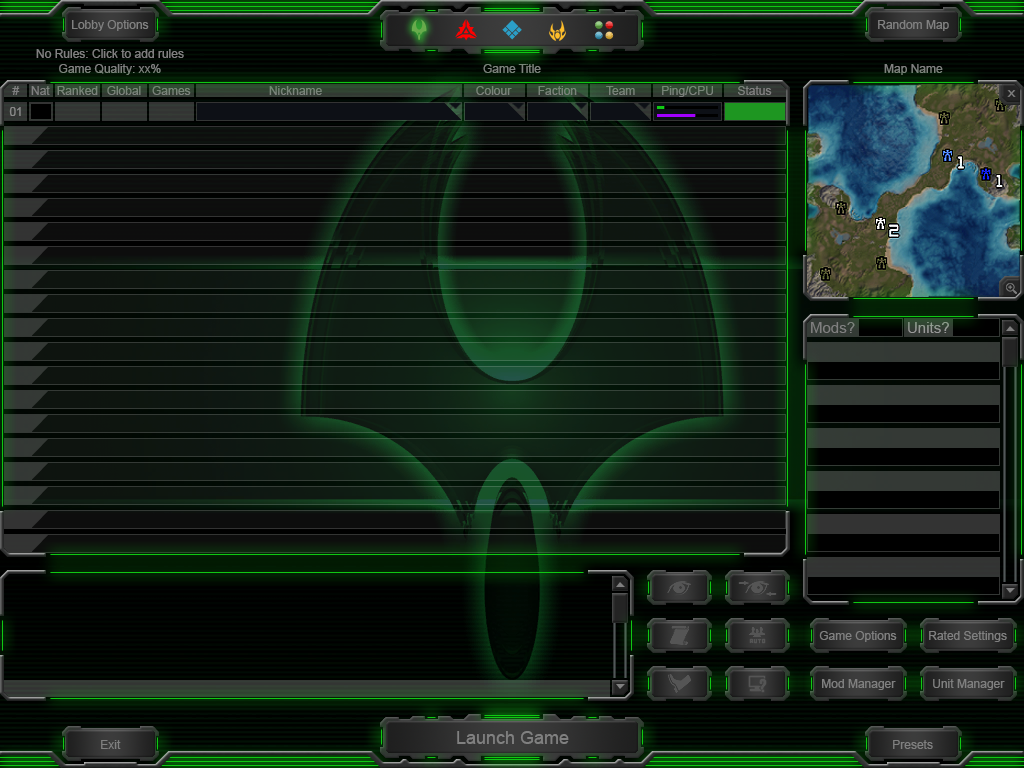
<style>
.page{position:relative;width:1024px;height:768px}
.page>*{position:absolute;margin:0}
.t1{font:12px "ArialMT";color:#808080}
.t2{font:12px "ArialMT";color:#888888}
.t3{font:15px "ArialMT";color:#808080}
.t4{font:15px "ArialMT";color:#999999}
.t5{font:18px "ArialMT";color:#808080}
</style>
<div class="page">
<p class="t1" style="left:72px;top:20px;width:77px;height:11px">Lobby Options</p>
<p class="t1" style="left:878px;top:20px;width:71px;height:11px">Random Map</p>
<p class="t1" style="left:36px;top:49px;width:148px;height:9px">No Rules: Click to add rules</p>
<p class="t1" style="left:59px;top:64px;width:102px;height:11px">Game Quality: xx%</p>
<p class="t1" style="left:483px;top:64px;width:58px;height:9px">Game Title</p>
<p class="t1" style="left:884px;top:64px;width:59px;height:11px">Map Name</p>
<p class="t1" style="left:12px;top:86px;width:8px;height:9px">#</p>
<p class="t1" style="left:31px;top:86px;width:19px;height:9px">Nat</p>
<p class="t1" style="left:57px;top:86px;width:41px;height:9px">Ranked</p>
<p class="t1" style="left:107px;top:86px;width:34px;height:9px">Global</p>
<p class="t1" style="left:152px;top:86px;width:39px;height:9px">Games</p>
<p class="t1" style="left:269px;top:86px;width:53px;height:9px">Nickname</p>
<p class="t1" style="left:476px;top:86px;width:36px;height:9px">Colour</p>
<p class="t1" style="left:538px;top:86px;width:39px;height:9px">Faction</p>
<p class="t1" style="left:606px;top:86px;width:29px;height:9px">Team</p>
<p class="t1" style="left:662px;top:86px;width:51px;height:11px">Ping/CPU</p>
<p class="t1" style="left:738px;top:86px;width:34px;height:9px">Status</p>
<p class="t2" style="left:9px;top:107px;width:12px;height:9px">01</p>
<p class="t3" style="left:811px;top:322px;width:44px;height:11px">Mods?</p>
<p class="t4" style="left:908px;top:322px;width:41px;height:11px">Units?</p>
<p class="t1" style="left:819px;top:631px;width:78px;height:11px">Game Options</p>
<p class="t1" style="left:929px;top:631px;width:78px;height:11px">Rated Settings</p>
<p class="t1" style="left:822px;top:679px;width:74px;height:11px">Mod Manager</p>
<p class="t1" style="left:933px;top:679px;width:72px;height:11px">Unit Manager</p>
<p class="t5" style="left:457px;top:731px;width:112px;height:13px">Launch Game</p>
<p class="t1" style="left:101px;top:740px;width:20px;height:9px">Exit</p>
<p class="t1" style="left:893px;top:740px;width:40px;height:9px">Presets</p>
</div>
